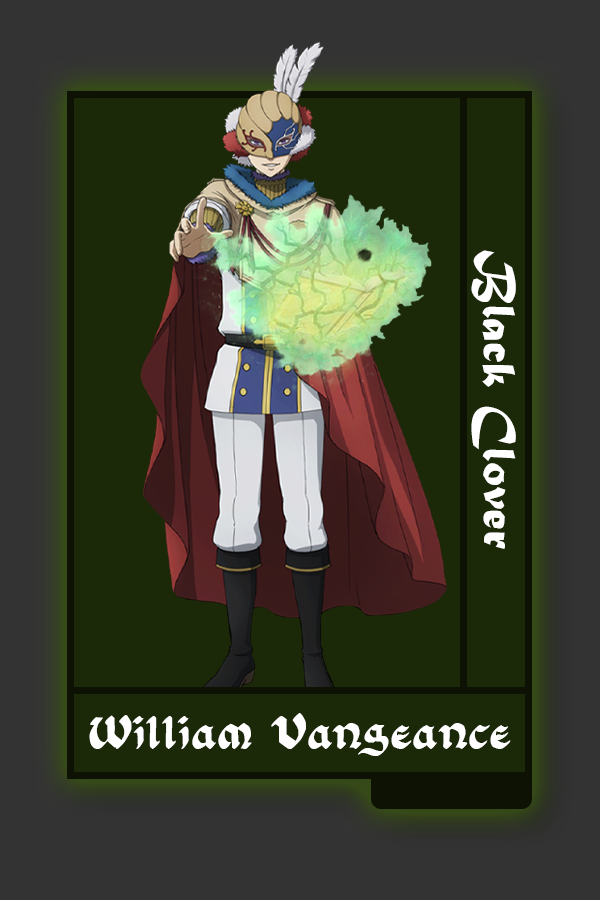
<style>
.page{position:relative;width:600px;height:900px;background:#1b2908}
.page>*{position:absolute;margin:0}
.t1{font:48.8px "MaturaMTScriptCapitals";color:#ffffff}
.t2{font:40px "FloranteatLaura";color:#ffffff}
</style>
<div class="page">
<p class="t1" style="left:471px;top:250px;width:45px;height:299px;rotate:90deg">Black Clover</p>
<p class="t2" style="left:89px;top:713px;width:422px;height:43px">William Vangeance</p>
</div>
